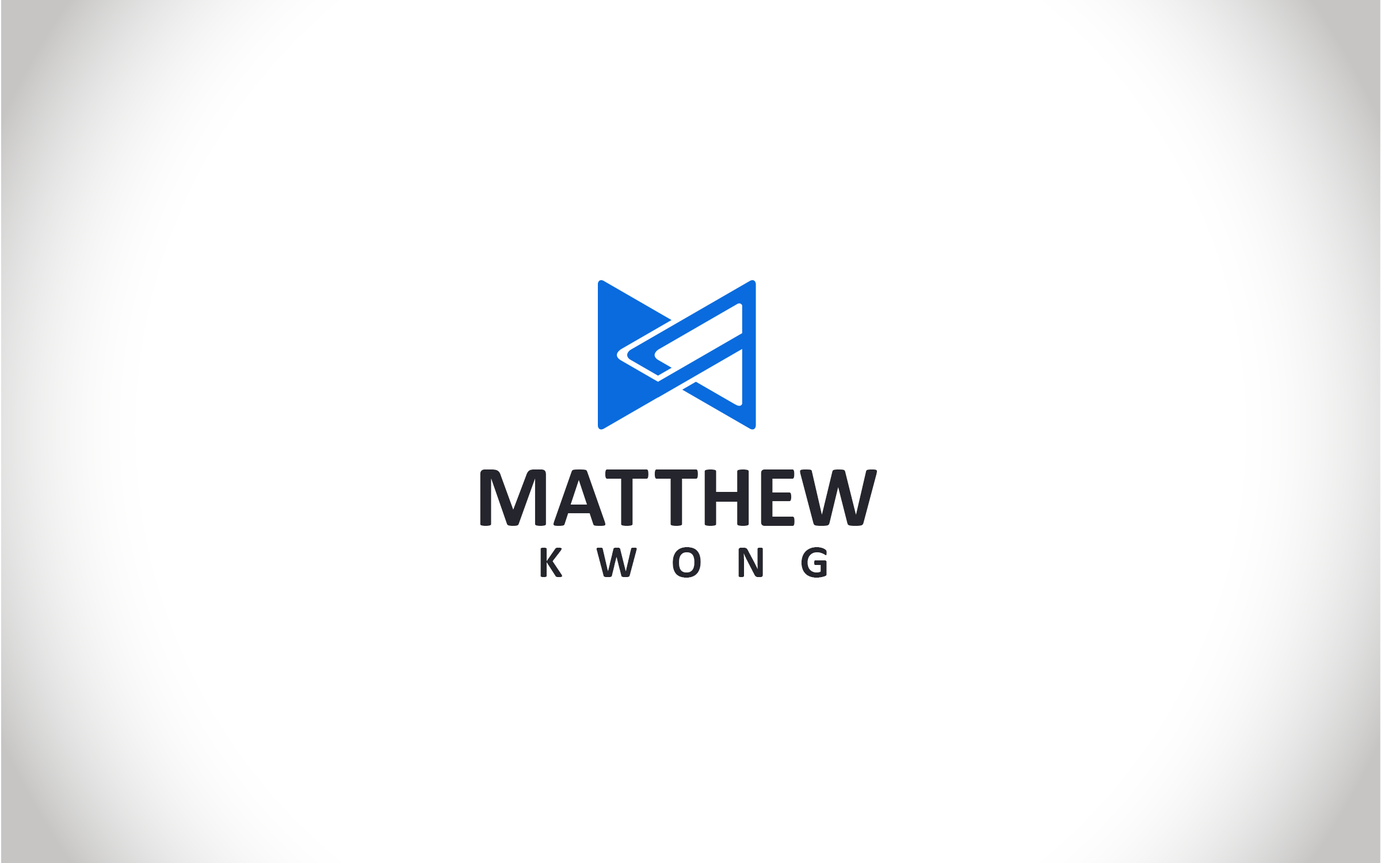
<style>
.page{position:relative;width:1381px;height:863px;background:#ffffff}
.page>*{position:absolute;margin:0}
.t1{font:89.3px "Calibri-Bold";color:#25252d}
.t2{font:46.4px "Calibri-Bold";letter-spacing:0.72em;color:#25252d}
</style>
<div class="page">
<p class="t1" style="left:480px;top:470px;width:398px;height:56px">MATTHEW</p>
<p class="t2" style="left:540px;top:547px;width:287px;height:31px">KWONG</p>
</div>
